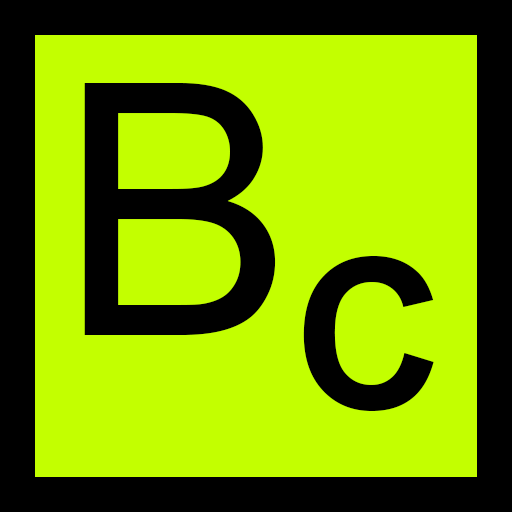
<style>
.page{position:relative;width:512px;height:512px;background:#c3ff00}
.page>*{position:absolute;margin:0}
.t1{font:352.3px "ArialMT";color:#000000}
.t2{font:207.6px "Arial-BoldMT";color:#000000}
</style>
<div class="page">
<p class="t1" style="left:84px;top:83px;width:192px;height:252px">B</p>
<p class="t2" style="left:303px;top:256px;width:131px;height:155px">C</p>
</div>
